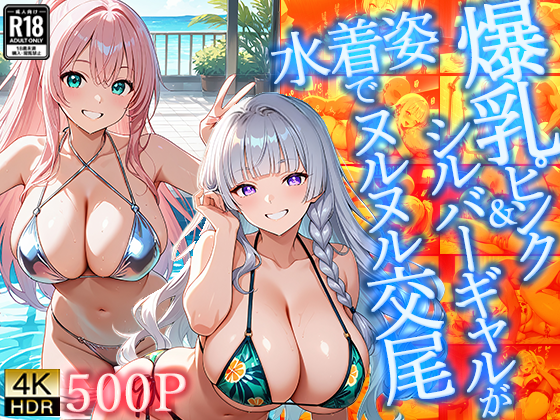
<style>
.page{position:relative;width:560px;height:420px}
.page>*{position:absolute;margin:0}
.t1{font:60px "YuMinPr6N-Regular";color:#e1f2ff;font-weight:bold}
.t2{font:37.5px "YuMinPr6N-Regular";color:#e1f2ff;font-weight:bold}
.t3{font:60px "YuMinPr6N-Regular";color:#e8f6ff;font-weight:bold}
.t4{font:75px "YuMinPr6N-Regular";color:#e8f6ff;font-weight:bold}
.t5{font:60px "YuMinPr6N-Regular";letter-spacing:-0.03em;color:#e5f5ff;font-weight:bold}
.t6{font:37.5px "YuMinPr6N-Regular";letter-spacing:-0.03em;color:#e5f5ff;font-weight:bold}
.t7{font:37.5px "YuMinPr6N-Regular";letter-spacing:-0.03em;color:#dff1ff;font-weight:bold}
.t8{font:52px "YuMinPr6N-Regular";font-weight:bold}
</style>
<div class="page">
<p class="t1" style="left:271px;top:11px;width:168px;height:92px;rotate:-10deg">水着姿<span class="t2">で</span></p>
<p class="t1" style="left:271px;top:11px;width:168px;height:92px;rotate:-10deg">水着姿<span class="t2">で</span></p>
<p class="t3" style="left:355px;top:110px;width:100px;height:296px;rotate:-10deg">ヌルヌル<span class="t4">交尾</span></p>
<p class="t3" style="left:355px;top:110px;width:100px;height:296px;rotate:-10deg">ヌルヌル<span class="t4">交尾</span></p>
<p class="t5" style="left:426px;top:119px;width:90px;height:299px;rotate:-10deg">シルバーギャル<span class="t6">が</span></p>
<p class="t5" style="left:426px;top:119px;width:90px;height:299px;rotate:-10deg">シルバーギャル<span class="t6">が</span></p>
<p class="t7" style="left:489px;top:199px;width:29px;height:29px;rotate:-10deg">&amp;</p>
<p class="t7" style="left:489px;top:199px;width:29px;height:29px;rotate:-10deg">&amp;</p>
<p class="t8" style="left:66px;top:373px;width:120px;height:39px">500P</p>
</div>
